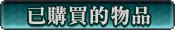
<style>
.page{position:relative;width:175px;height:30px}
.page>*{position:absolute;margin:0}
.t1{font:20px "RyuminPr6N-ExBold";letter-spacing:0.075em;color:#d9d4d2}
</style>
<div class="page">
<p class="t1" style="left:28px;top:6px;width:122px;height:20px">已購買的物品</p>
</div>
